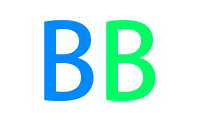
<style>
.page{position:relative;width:200px;height:123px;background:#ffffff}
.page>*{position:absolute;margin:0}
.t1{font:102.8px "AdobeHeitiStd-Regular";color:#0089fd}
.t2{font:102.8px "AdobeHeitiStd-Regular";color:#00fd65}
</style>
<div class="page">
<p class="t1" style="left:44px;top:20px;width:112px;height:82px">B<span class="t2">B</span></p>
</div>
